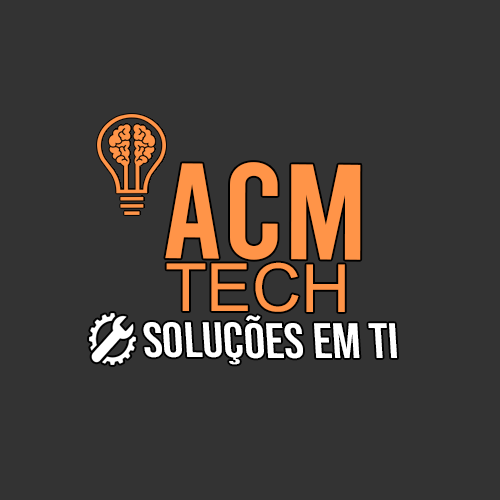
<style>
.page{position:relative;width:500px;height:500px;background:#333333}
.page>*{position:absolute;margin:0}
.t1{font:135.3px "Bebas-Regular";color:#ff9448;scale:1.06 1}
.t2{font:66.1px "ArialMT";color:#ff9448}
.t3{font:49.9px "BebasNeue-Regular";color:#ffffff;scale:1.06 1}
</style>
<div class="page">
<p class="t1" style="left:165px;top:162px;width:196px;height:98px">ACM</p>
<p class="t2" style="left:166px;top:262px;width:179px;height:50px">TECH</p>
<p class="t3" style="left:143px;top:315px;width:254px;height:50px">soluções em TI</p>
</div>
